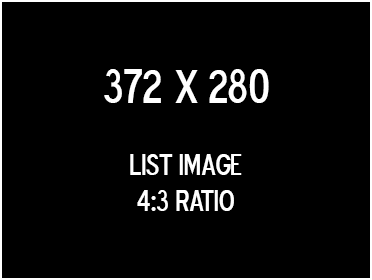
<style>
.page{position:relative;width:372px;height:280px;background:#000000}
.page>*{position:absolute;margin:0}
.t1{font:30px "BlueHighwayDType";color:#ffffff}
.t2{font:48px "BlueHighwayDType";color:#ffffff}
</style>
<div class="page">
<p class="t1" style="left:104px;top:69px;width:165px;height:142px;text-align:center"><span class="t2">372 x 280<br></span><br>LIST IMAGE<br>4:3 RATIO</p>
</div>
